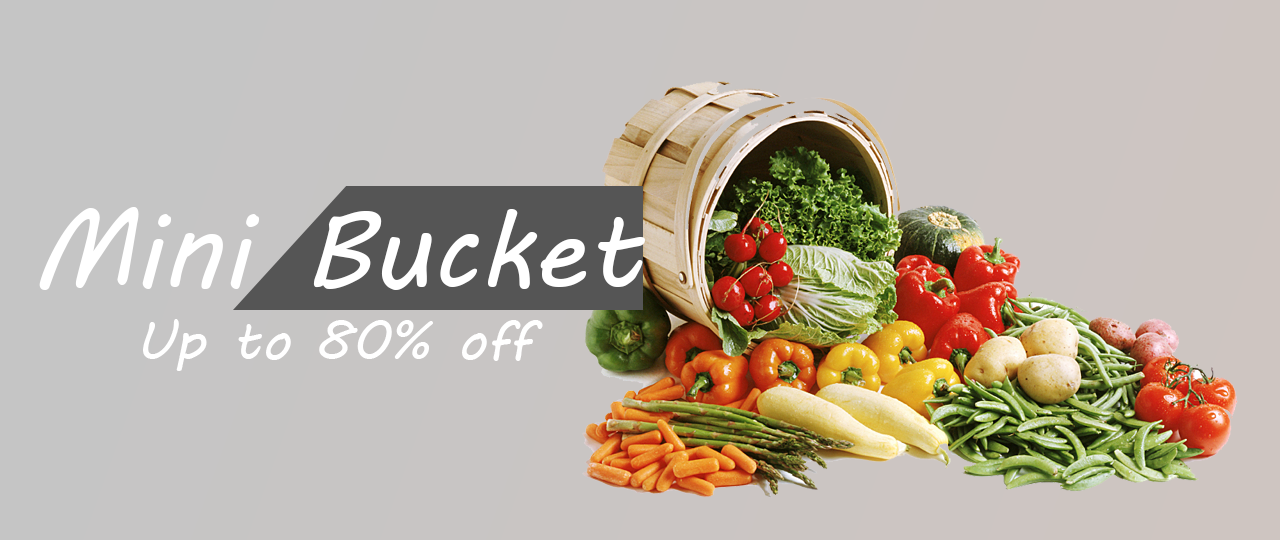
<style>
.page{position:relative;width:1280px;height:540px}
.page>*{position:absolute;margin:0}
.t1{font:110px "MVBoli";color:#ffffff}
.t2{font:55px "MVBoli";color:#ffffff}
</style>
<div class="page">
<p class="t1" style="left:39px;top:207px;width:606px;height:83px">Mini Bucket</p>
<p class="t2" style="left:143px;top:319px;width:400px;height:52px">Up to 80% off</p>
</div>
